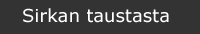
<style>
.page{position:relative;width:200px;height:34px;background:#333333}
.page>*{position:absolute;margin:0}
.t1{font:18px "Verdana";color:#ffffff}
</style>
<div class="page">
<p class="t1" style="left:23px;top:8px;width:146px;height:15px">Sirkan taustasta</p>
</div>
